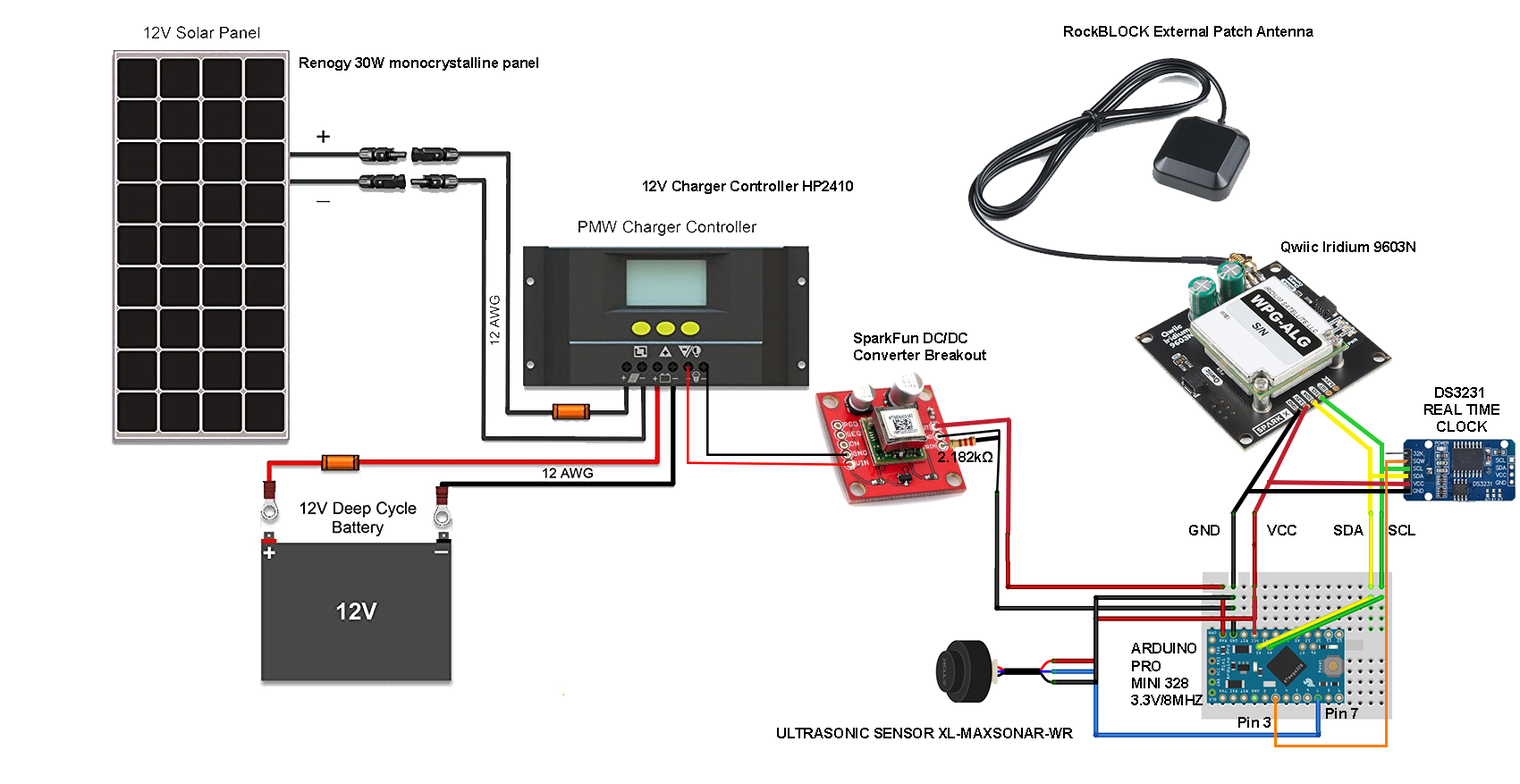
<style>
.page{position:relative;width:1520px;height:784px;background:#ffffff}
.page>*{position:absolute;margin:0}
.t1{font:14.3px "Arial-BoldMT";color:#000000}
</style>
<div class="page">
<p class="t1" style="left:1064px;top:26px;width:250px;height:11px">RockBLOCK External Patch Antenna</p>
<p class="t1" style="left:300px;top:57px;width:238px;height:14px">Renogy 30W monocrystalline panel</p>
<p class="t1" style="left:643px;top:181px;width:210px;height:13px">12V Charger Controller HP2410</p>
<p class="t1" style="left:1282px;top:241px;width:134px;height:12px">Qwiic Iridium 9603N</p>
<p class="t1" style="left:854px;top:333px;width:132px;height:27px">SparkFun DC/DC <br>Converter Breakout</p>
<p class="t1" style="left:1425px;top:387px;width:75px;height:45px;text-align:center">DS3231 <br>REAL TIME<br>CLOCK</p>
<p class="t1" style="left:938px;top:452px;width:55px;height:10px">2.182kΩ</p>
<p class="t1" style="left:1189px;top:525px;width:31px;height:11px">GND</p>
<p class="t1" style="left:1267px;top:525px;width:30px;height:11px">VCC</p>
<p class="t1" style="left:1334px;top:525px;width:30px;height:11px">SDA</p>
<p class="t1" style="left:1389px;top:525px;width:27px;height:11px">SCL</p>
<p class="t1" style="left:1131px;top:643px;width:72px;height:63px">ARDUINO<br>PRO <br>MINI 328 <br>3.3V/8MHZ</p>
<p class="t1" style="left:1326px;top:708px;width:32px;height:11px">Pin 7</p>
<p class="t1" style="left:1239px;top:717px;width:32px;height:11px">Pin 3</p>
<p class="t1" style="left:777px;top:728px;width:296px;height:11px">ULTRASONIC SENSOR XL-MAXSONAR-WR</p>
</div>
